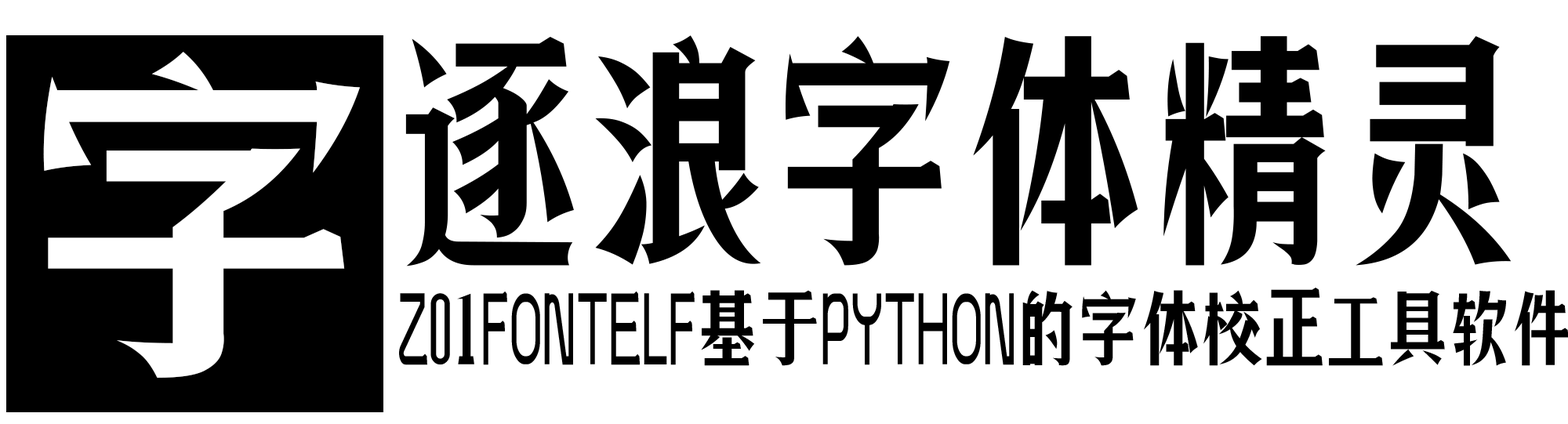
<style>
.page{position:relative;width:1568px;height:424px;background:#ffffff}
.page>*{position:absolute;margin:0}
.t1{font:56.4px/235.2px "ZoomlaMalieA038";color:#000000;text-transform:uppercase}
.t2{font:172.5px/235.2px "ZoomlaMalieA038";color:#000000;text-transform:uppercase}
.t3{font:245px "ZoomlaMalieA038";color:#ffffff;text-transform:uppercase;scale:1.36 1}
</style>
<div class="page">
<p class="t1" style="left:399px;top:35px;width:1170px;height:331px"><span class="t2">逐浪字体精灵<br></span>Z01FontElf基于Python的字体校正工具软件</p>
<p class="t3" style="left:43px;top:52px;width:317px;height:326px">字</p>
</div>
